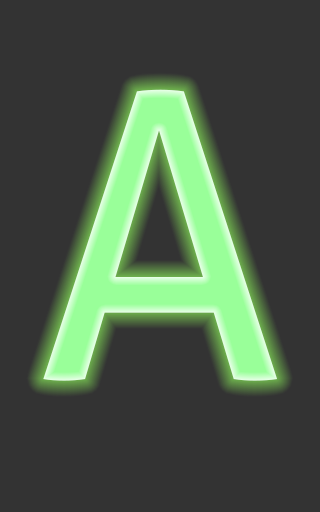
<style>
.page{position:relative;width:320px;height:512px;background:#333333}
.page>*{position:absolute;margin:0}
.t1{font:400px "Aller-Regular"}
</style>
<div class="page">
<p class="t1" style="left:43px;top:89px;width:234px;height:292px">A</p>
</div>
